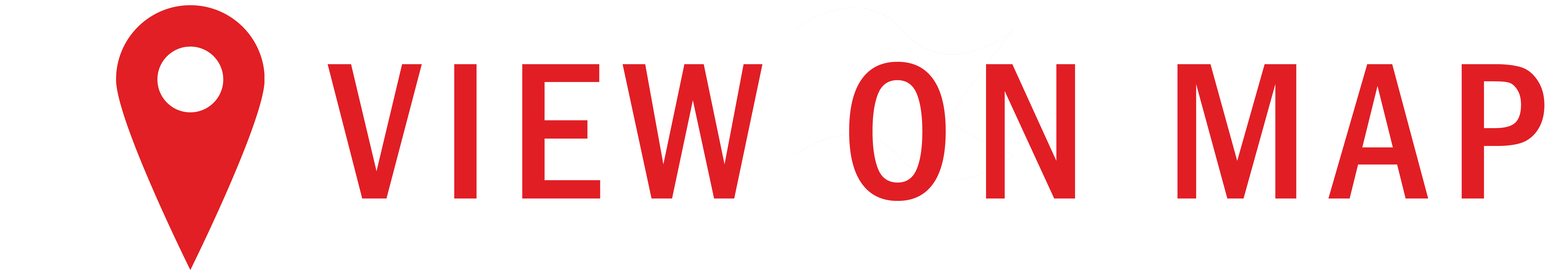
<style>
.page{position:relative;width:1568px;height:276px;background:#ffffff}
.page>*{position:absolute;margin:0}
.t1{font:201.4px "FranklinGothic-MediumCond";letter-spacing:0.1em;color:#e21e25}
</style>
<div class="page">
<p class="t1" style="left:327px;top:62px;width:1217px;height:139px">VIEW ON MAP</p>
</div>
